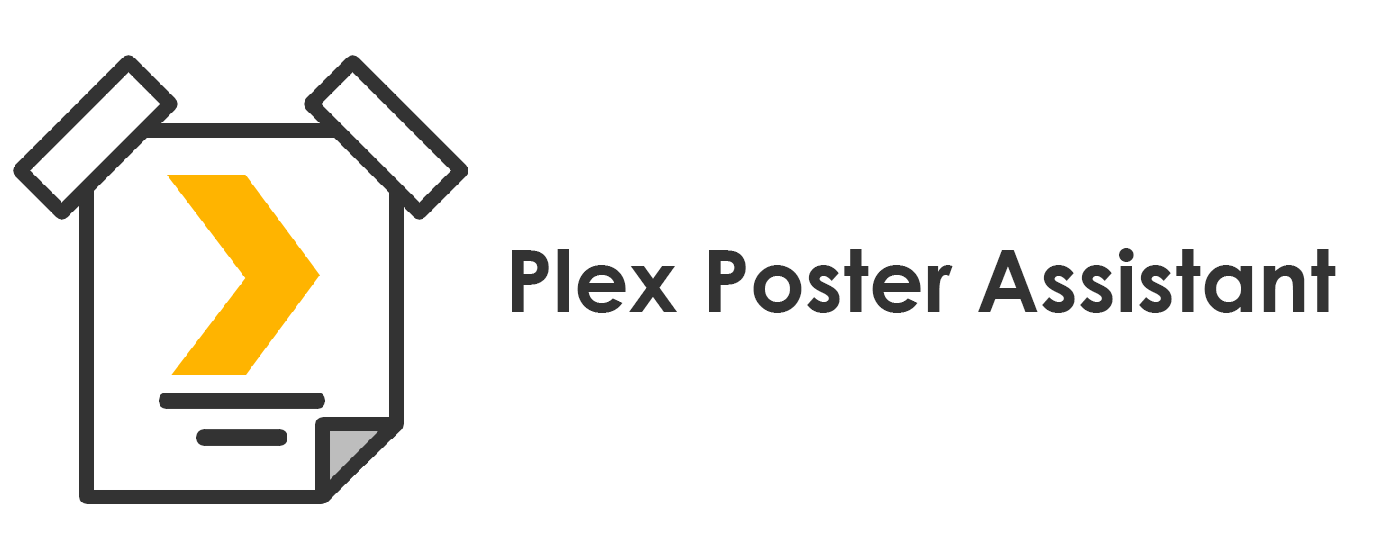
<style>
.page{position:relative;width:1400px;height:560px;background:#ffffff}
.page>*{position:absolute;margin:0}
.t1{font:86.4px "CenturyGothic-Bold";color:#333333}
</style>
<div class="page">
<p class="t1" style="left:512px;top:248px;width:824px;height:65px">Plex Poster Assistant</p>
</div>
